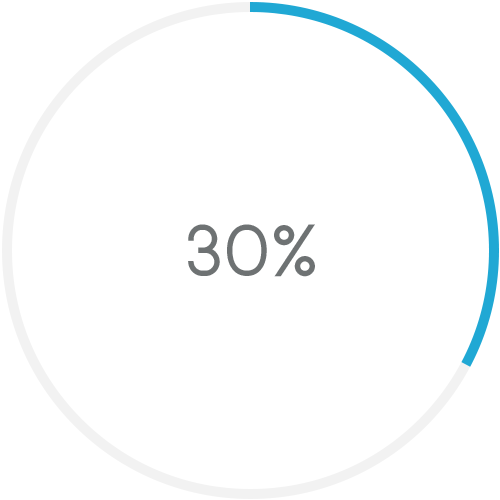
<style>
.page{position:relative;width:500px;height:500px;background:#ffffff}
.page>*{position:absolute;margin:0}
.t1{font:72px "Neou-Bold";color:#6e7273}
</style>
<div class="page">
<p class="t1" style="left:188px;top:224px;width:127px;height:53px">30%</p>
</div>
